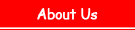
<style>
.page{position:relative;width:135px;height:30px;background:#ff0000}
.page>*{position:absolute;margin:0}
.t1{font:13.9px "ComicSansMS";letter-spacing:-0.025em;color:#ffffff;font-weight:bold}
</style>
<div class="page">
<p class="t1" style="left:37px;top:8px;width:61px;height:12px">About Us</p>
</div>
